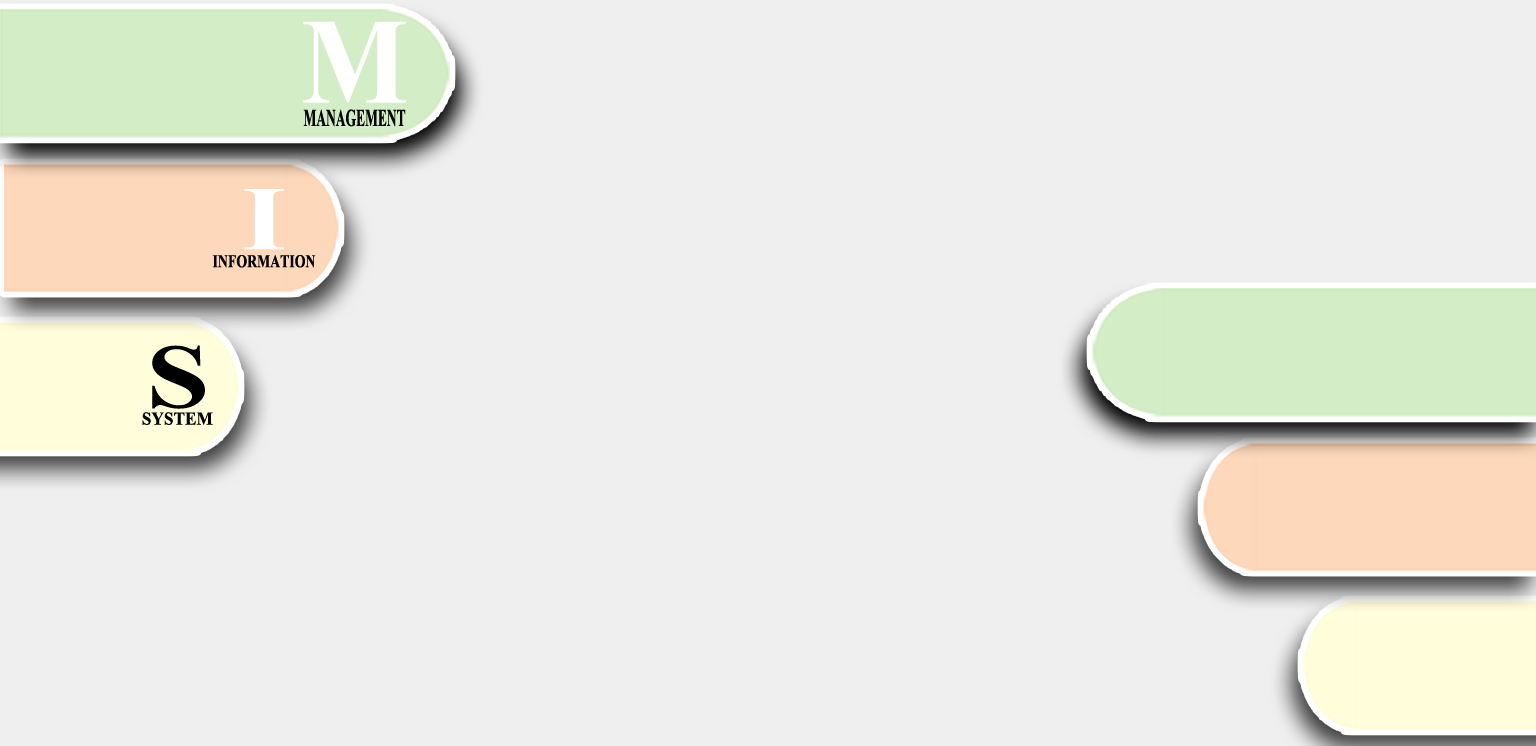
<style>
.page{position:relative;width:1536px;height:746px;background:#efefef}
.page>*{position:absolute;margin:0}
.t1{font:121.7px "TimesNewRomanPS-BoldMT";color:#ffffff;scale:0.93 1}
.t2{font:24.2px "TimesNewRomanPS-BoldMT";color:#000000;scale:0.56 1}
.t3{font:90.6px "TimesNewRomanPS-BoldMT";color:#ffffff;scale:1.25 1}
.t4{font:18px "TimesNewRomanPS-BoldMT";color:#000000;scale:0.77 1}
.t5{font:90.6px "TimesNewRomanPS-BoldMT";color:#000000;scale:1.25 1}
.t6{font:18px "TimesNewRomanPS-BoldMT";color:#000000;scale:0.96 1}
</style>
<div class="page">
<p class="t1" style="left:303px;top:21px;width:103px;height:82px">M</p>
<p class="t2" style="left:303px;top:109px;width:103px;height:18px">MANAGEMENT</p>
<p class="t3" style="left:244px;top:189px;width:40px;height:61px;rotate:180deg">I</p>
<p class="t4" style="left:212px;top:255px;width:104px;height:13px">INFORMATION</p>
<p class="t5" style="left:152px;top:345px;width:53px;height:64px">S</p>
<p class="t6" style="left:142px;top:412px;width:71px;height:13px">SYSTEM</p>
</div>
